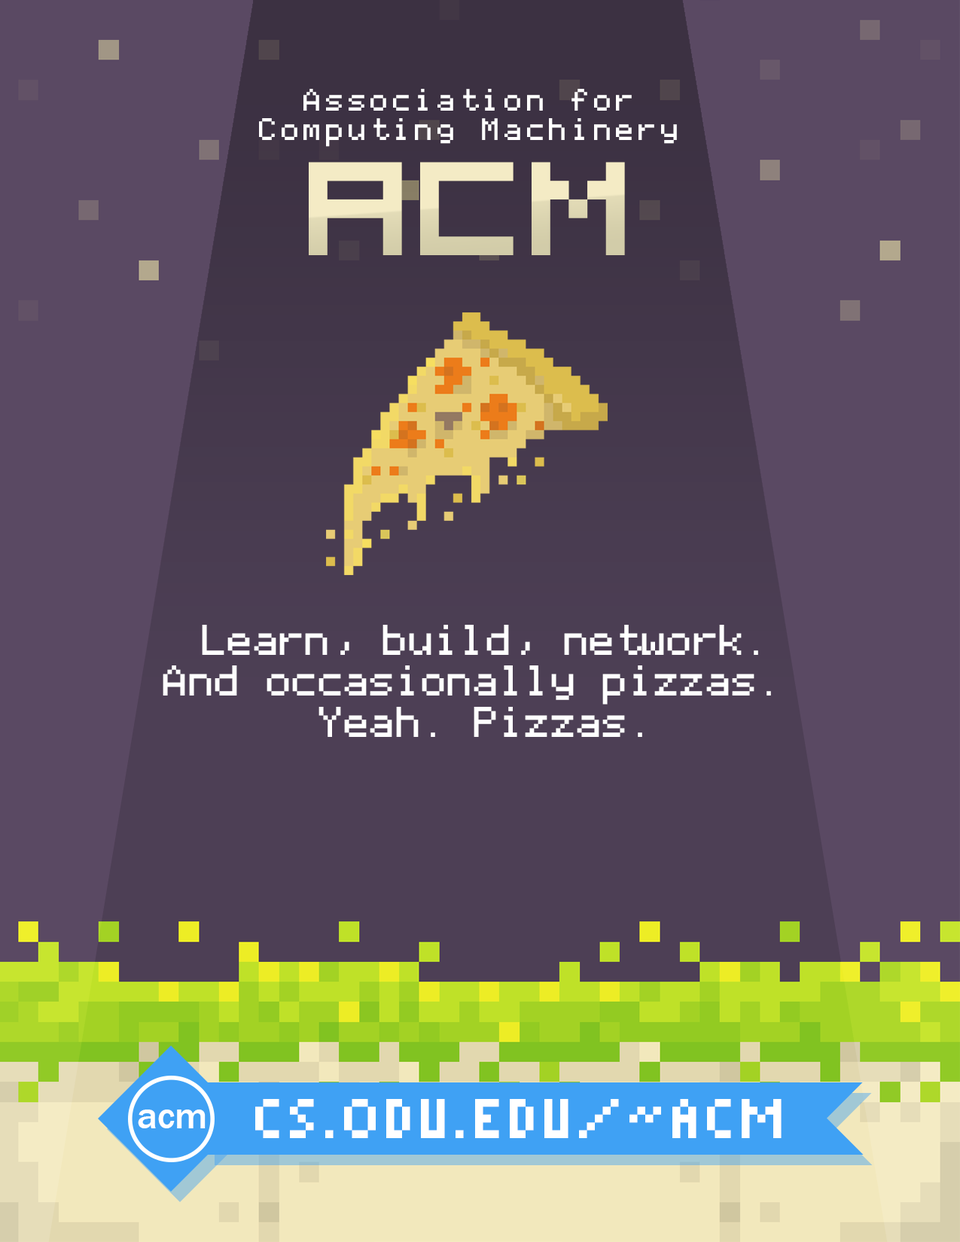
<style>
.page{position:relative;width:960px;height:1242px;background:#5a4963}
.page>*{position:absolute;margin:0}
.t1{font:24.8px "Apple";letter-spacing:-0.1em;color:#ffffff}
.t2{font:148.6px "5x5-Pixel";color:#f2e8bc}
.t3{font:34.5px "Apple";letter-spacing:-0.25em;color:#ffffff}
.t4{font:37.5px "FranklinGothic-Medium";color:#ffffff}
.t5{font:62.7px "Pixelated";letter-spacing:0.05em;color:#ffffff;text-transform:uppercase}
</style>
<div class="page">
<p class="t1" style="left:259px;top:89px;width:418px;height:58px;text-align:center">Association for<br>Computing Machinery</p>
<p class="t2" style="left:309px;top:162px;width:316px;height:93px">acm</p>
<p class="t3" style="left:163px;top:625px;width:608px;height:112px;text-align:center">Learn, build, network.<br>And occasionally pizzas. <br>Yeah. Pizzas.</p>
<p class="t4" style="left:138px;top:1110px;width:68px;height:19px">acm</p>
<p class="t5" style="left:255px;top:1099px;width:526px;height:39px">cs.odu.edu/~acm</p>
</div>
